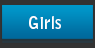
<style>
.page{position:relative;width:95px;height:48px;background:#333333}
.page>*{position:absolute;margin:0}
.t1{font:17px "BellGothicStd-Bold";color:#ffffff}
</style>
<div class="page">
<p class="t1" style="left:29px;top:16px;width:32px;height:13px">Girls</p>
</div>
